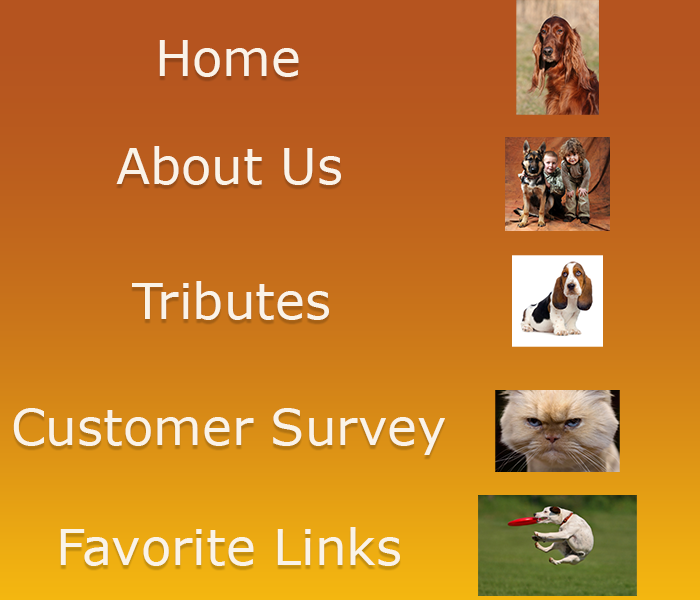
<style>
.page{position:relative;width:700px;height:600px}
.page>*{position:absolute;margin:0}
.t1{font:50px "Verdana";color:#faf3e8}
</style>
<div class="page">
<p class="t1" style="left:159px;top:40px;width:140px;height:37px">Home</p>
<p class="t1" style="left:116px;top:146px;width:225px;height:39px">About Us</p>
<p class="t1" style="left:132px;top:281px;width:197px;height:39px">Tributes</p>
<p class="t1" style="left:13px;top:408px;width:432px;height:47px">Customer Survey</p>
<p class="t1" style="left:60px;top:527px;width:340px;height:39px">Favorite Links</p>
</div>
